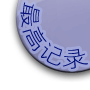
<style>
.page{position:relative;width:90px;height:90px;background:#ffffff}
.page>*{position:absolute;margin:0}
.t1{font:21px "FZYXJW--GB1-0";color:#021077;scale:0.67 1}
</style>
<div class="page">
<p class="t1" style="left:20px;top:2px;width:68px;height:67px;rotate:44deg">最高记录</p>
</div>
